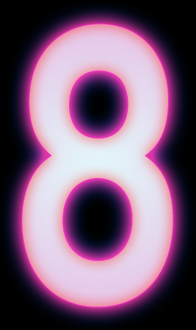
<style>
.page{position:relative;width:196px;height:330px}
.page>*{position:absolute;margin:0}
.t1{font:396px "AGBookRounded-Medium";letter-spacing:0.025em;scale:0.76 1}
</style>
<div class="page">
<p class="t1" style="left:22px;top:24px;width:151px;height:283px">8</p>
<p class="t1" style="left:22px;top:24px;width:151px;height:283px">8</p>
</div>
